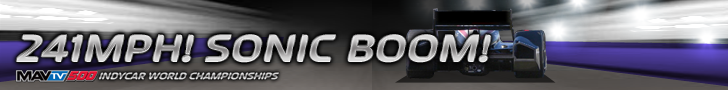
<style>
.page{position:relative;width:728px;height:90px}
.page>*{position:absolute;margin:0}
.t1{font:53.5px "SeptemberBoldItalic";text-transform:uppercase}
</style>
<div class="page">
<p class="t1" style="left:16px;top:34px;width:475px;height:29px">241mph! Sonic Boom!</p>
</div>
